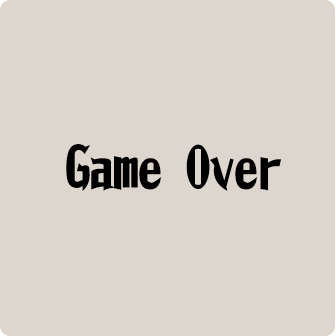
<style>
.page{position:relative;width:336px;height:336px;background:#ddd6cf}
.page>*{position:absolute;margin:0}
.t1{font:48px "ShowaModern";color:#000000}
</style>
<div class="page">
<p class="t1" style="left:66px;top:144px;width:215px;height:47px">Game Over</p>
</div>
